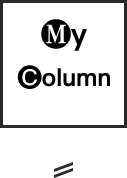
<style>
.page{position:relative;width:127px;height:178px;background:#ffffff}
.page>*{position:absolute;margin:0}
.t1{font:30px "PingFangSC-Semibold";color:#000000}
.t2{font:24px "PingFangSC-Semibold";color:#000000}
</style>
<div class="page">
<p class="t1" style="left:41px;top:19px;width:46px;height:32px">My</p>
<p class="t2" style="left:17px;top:65px;width:93px;height:24px">Column</p>
</div>
